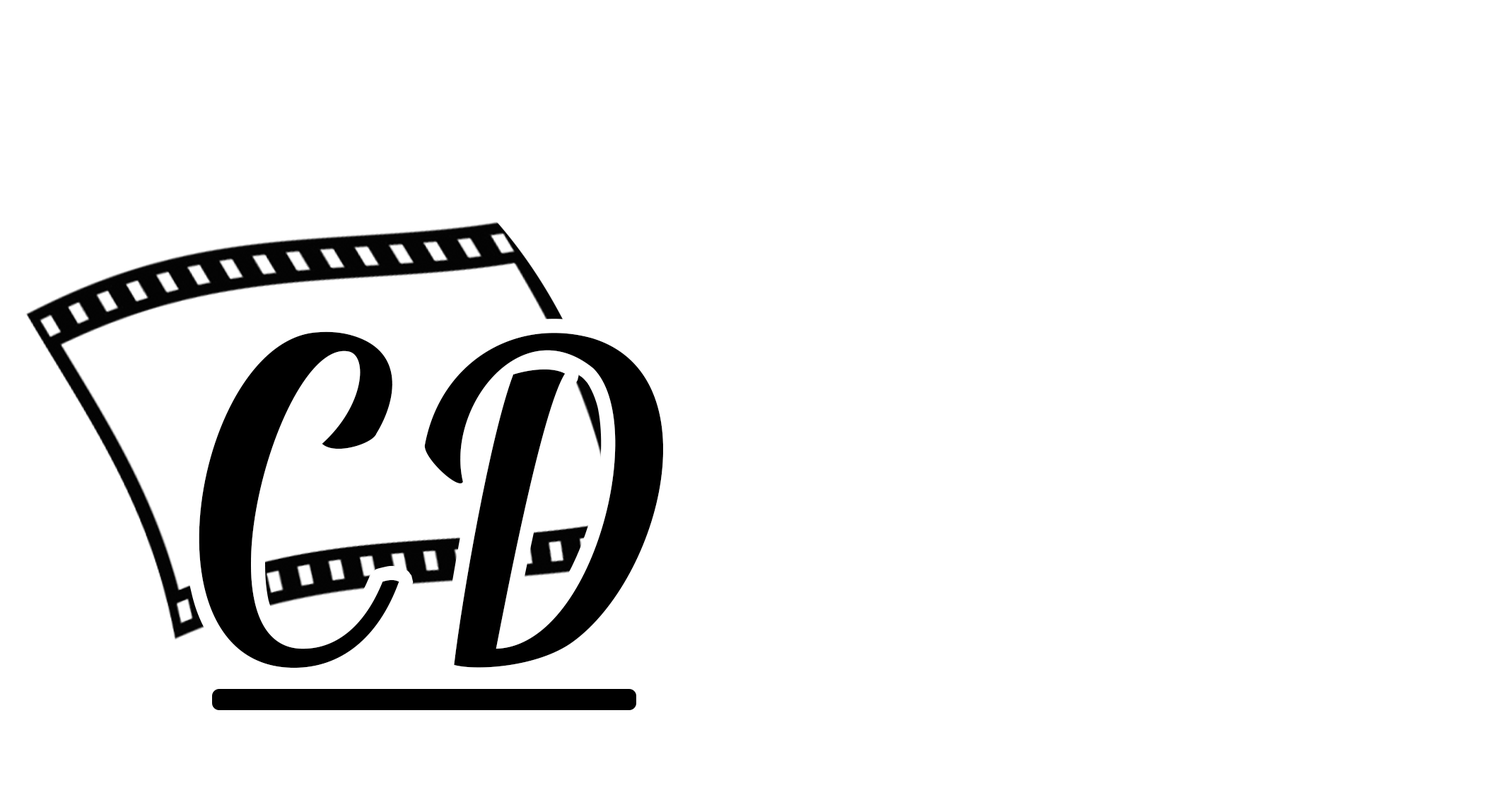
<style>
.page{position:relative;width:1486px;height:802px;background:#ffffff}
.page>*{position:absolute;margin:0}
.t1{font:441.9px "ShintiaScript";color:#000000}
</style>
<div class="page">
<p class="t1" style="left:199px;top:332px;width:464px;height:337px">CD</p>
</div>
